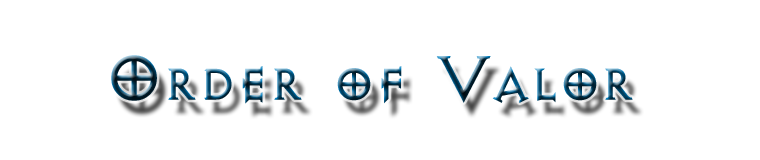
<style>
.page{position:relative;width:760px;height:160px;background:#ffffff}
.page>*{position:absolute;margin:0}
.t1{font:72px "AvQest"}
</style>
<div class="page">
<p class="t1" style="left:111px;top:55px;width:522px;height:49px">Order of Valor</p>
</div>
